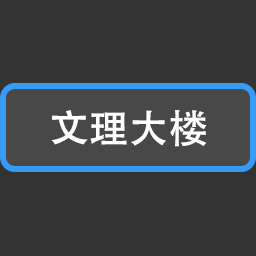
<style>
.page{position:relative;width:256px;height:256px;background:#333333}
.page>*{position:absolute;margin:0}
.t1{font:39px "AdobeHeitiStd-Regular";color:#ffffff;font-weight:bold}
</style>
<div class="page">
<p class="t1" style="left:51px;top:110px;width:156px;height:37px">文理大楼</p>
</div>
